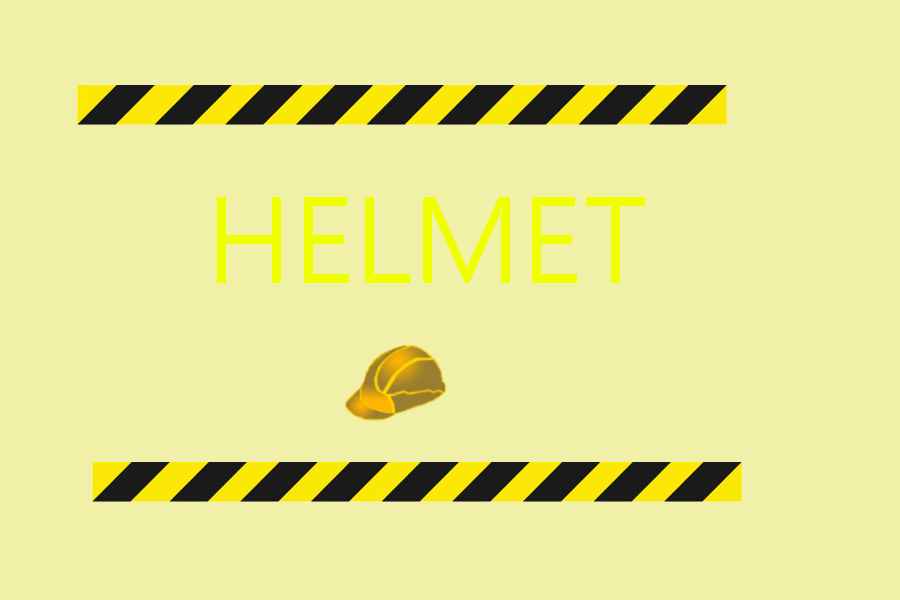
<style>
.page{position:relative;width:900px;height:600px;background:#f1f0a9}
.page>*{position:absolute;margin:0}
.t1{font:119.6px "MalgunGothic";color:#f0ff00}
</style>
<div class="page">
<p class="t1" style="left:217px;top:197px;width:428px;height:86px">HELMET</p>
</div>
